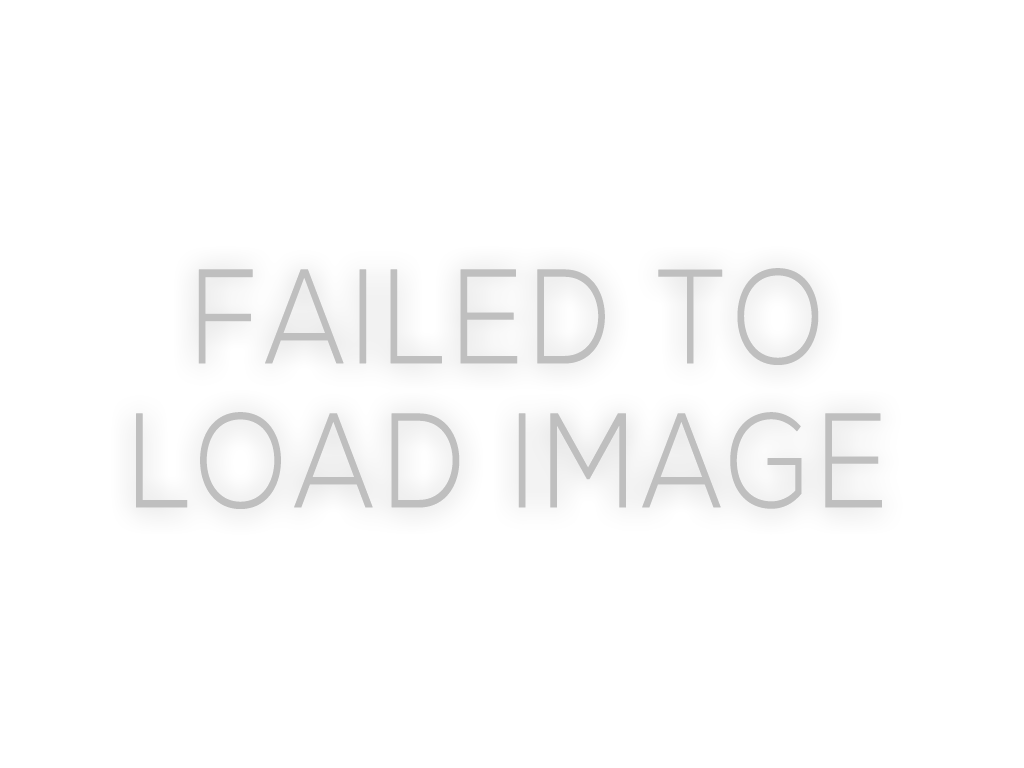
<style>
.page{position:relative;width:1024px;height:768px;background:#ffffff}
.page>*{position:absolute;margin:0}
.t1{font:133.3px/72px "NexaLight";letter-spacing:0.04em;color:#bfbfbf;font-weight:bold;scale:0.85 1}
</style>
<div class="page">
<p class="t1" style="left:136px;top:268px;width:746px;height:241px;text-align:center">FAILED TO<br><br>LOAD IMAGE</p>
</div>
